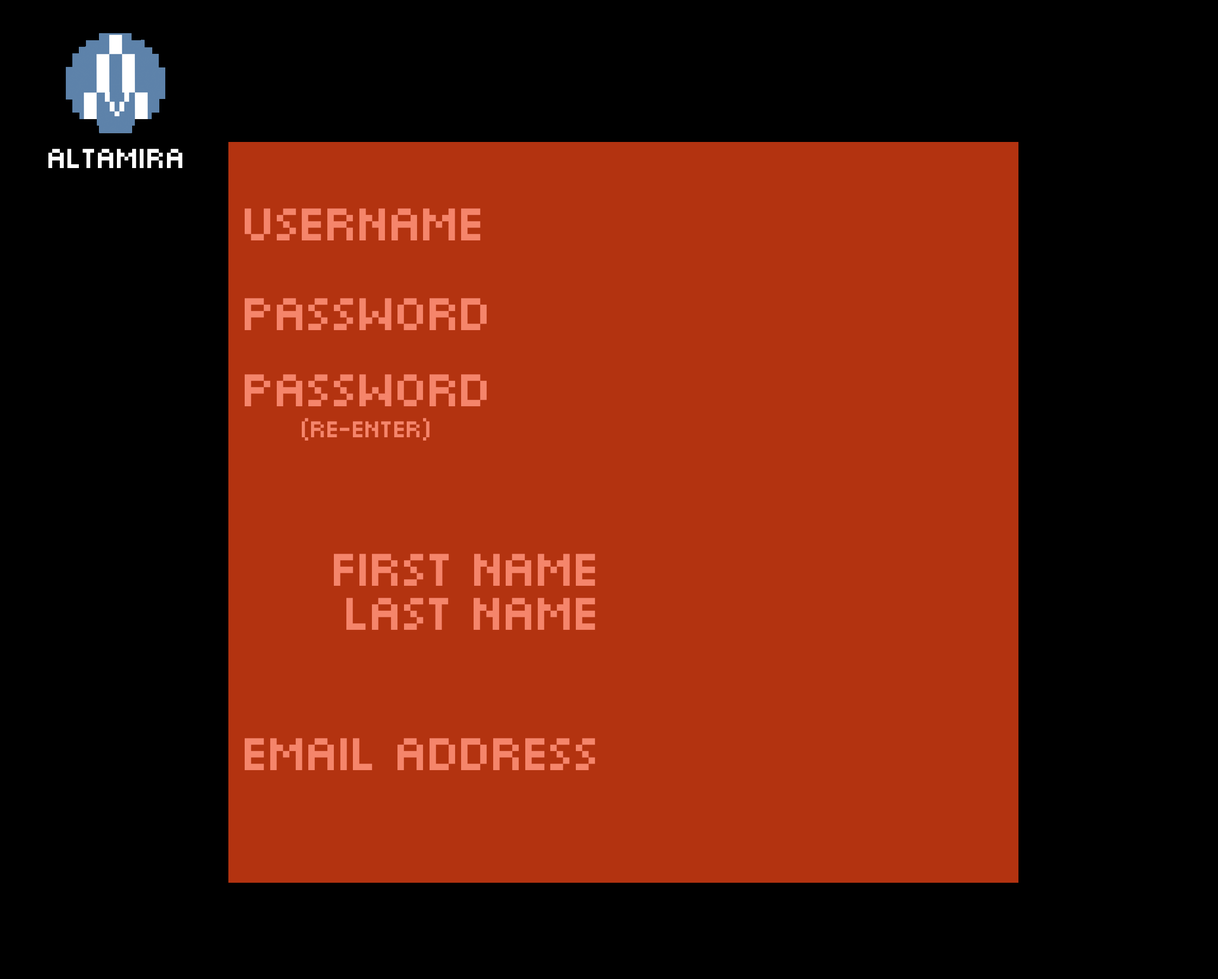
<style>
.page{position:relative;width:1218px;height:979px;background:#000000}
.page>*{position:absolute;margin:0}
.t1{font:65.3px "MunroSmall";color:#f5856b}
.t2{font:32.6px "MunroSmall";color:#f5856b}
</style>
<div class="page">
<p class="t1" style="left:245px;top:208px;width:236px;height:32px">Username</p>
<p class="t1" style="left:245px;top:298px;width:242px;height:32px">Password</p>
<p class="t1" style="left:245px;top:374px;width:242px;height:32px">Password</p>
<p class="t2" style="left:302px;top:418px;width:128px;height:22px">(Re-EnteR)</p>
<p class="t1" style="left:334px;top:554px;width:261px;height:32px">First Name</p>
<p class="t1" style="left:346px;top:598px;width:249px;height:32px">Last Name</p>
<p class="t1" style="left:245px;top:738px;width:350px;height:32px">EMail Address</p>
</div>
